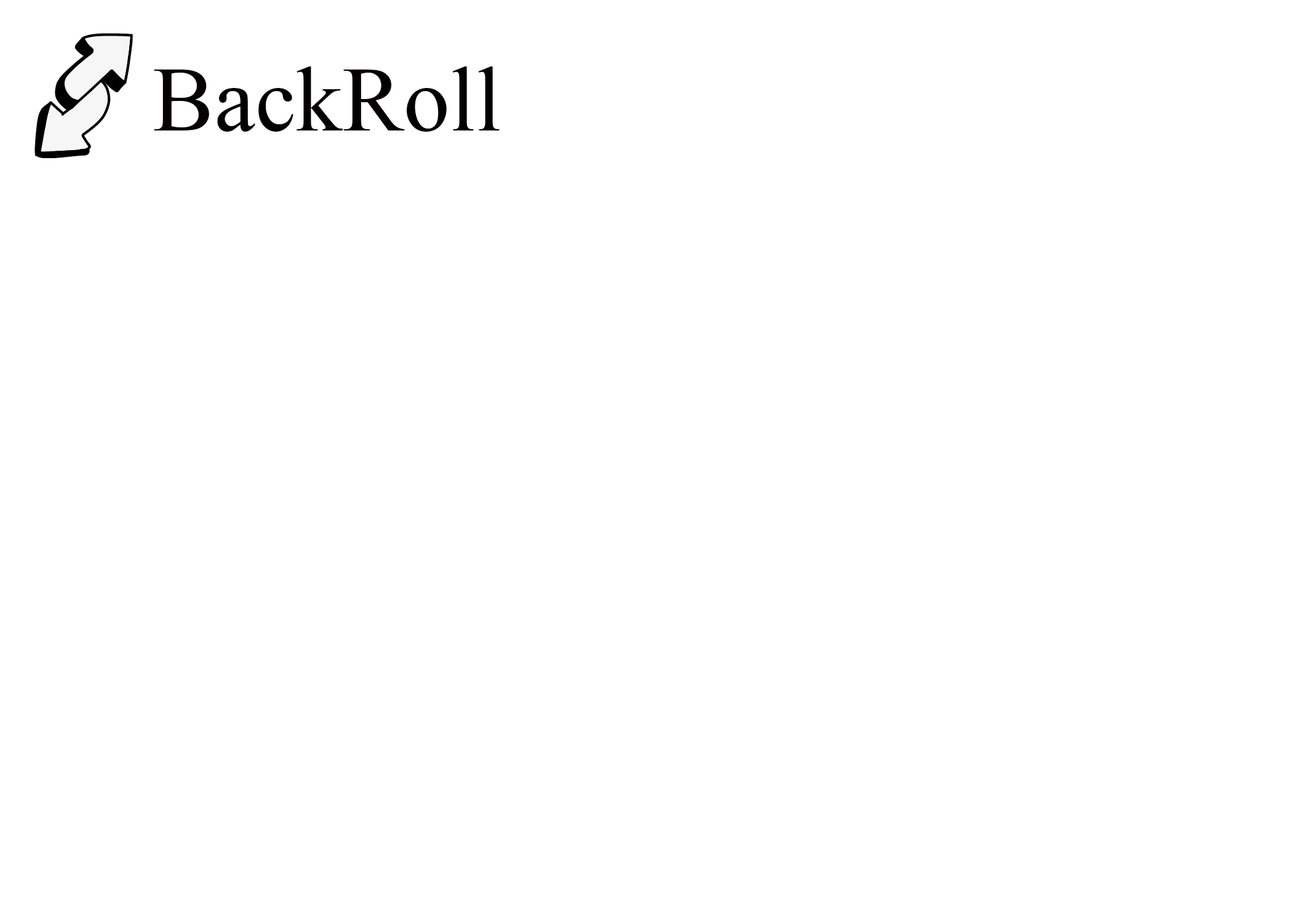
<style>
.page{position:relative;width:1292px;height:923px;background:#ffffff}
.page>*{position:absolute;margin:0}
.t1{font:92.3px "TimesNewRomanPSMT";color:#040000}
</style>
<div class="page">
<p class="t1" style="left:154px;top:66px;width:346px;height:66px">BackRoll</p>
</div>
